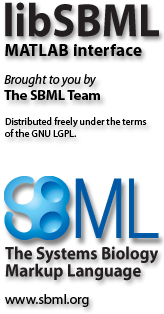
<style>
.page{position:relative;width:164px;height:314px;background:#ffffff}
.page>*{position:absolute;margin:0}
.t1{font:17px "Myriad-Bold";letter-spacing:0.01em;color:#000000}
.t2{font:13px/14px "Myriad-Italic";color:#000000}
.t3{font:14px/16px "Myriad-Bold";color:#000000}
.t4{font:10px/12px "Myriad-Roman";color:#000000}
.t5{font:14px "Myriad-Roman";color:#000000}
</style>
<div class="page">
<p class="t1" style="left:5px;top:44px;width:137px;height:12px">MATLAB interface</p>
<p class="t2" style="left:4px;top:74px;width:96px;height:26px">Brought to you by<br><span class="t3">The SBML Team</span></p>
<p class="t4" style="left:5px;top:117px;width:142px;height:20px">Distributed freely under the terms <br>of the GNU LGPL.</p>
<p class="t5" style="left:5px;top:294px;width:84px;height:13px">www.sbml.org</p>
</div>
